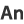
<style>
.page{position:relative;width:24px;height:24px;background:#ffffff}
.page>*{position:absolute;margin:0}
.t1{font:20px "MyriadPro-Semibold";color:#333333}
</style>
<div class="page">
<p class="t1" style="left:0px;top:5px;width:23px;height:15px">An</p>
</div>
